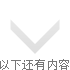
<style>
.page{position:relative;width:70px;height:70px;background:#ffffff}
.page>*{position:absolute;margin:0}
.t1{font:12px "STXihei";color:#777777}
</style>
<div class="page">
<p class="t1" style="left:0px;top:59px;width:69px;height:11px">以下还有内容</p>
</div>
